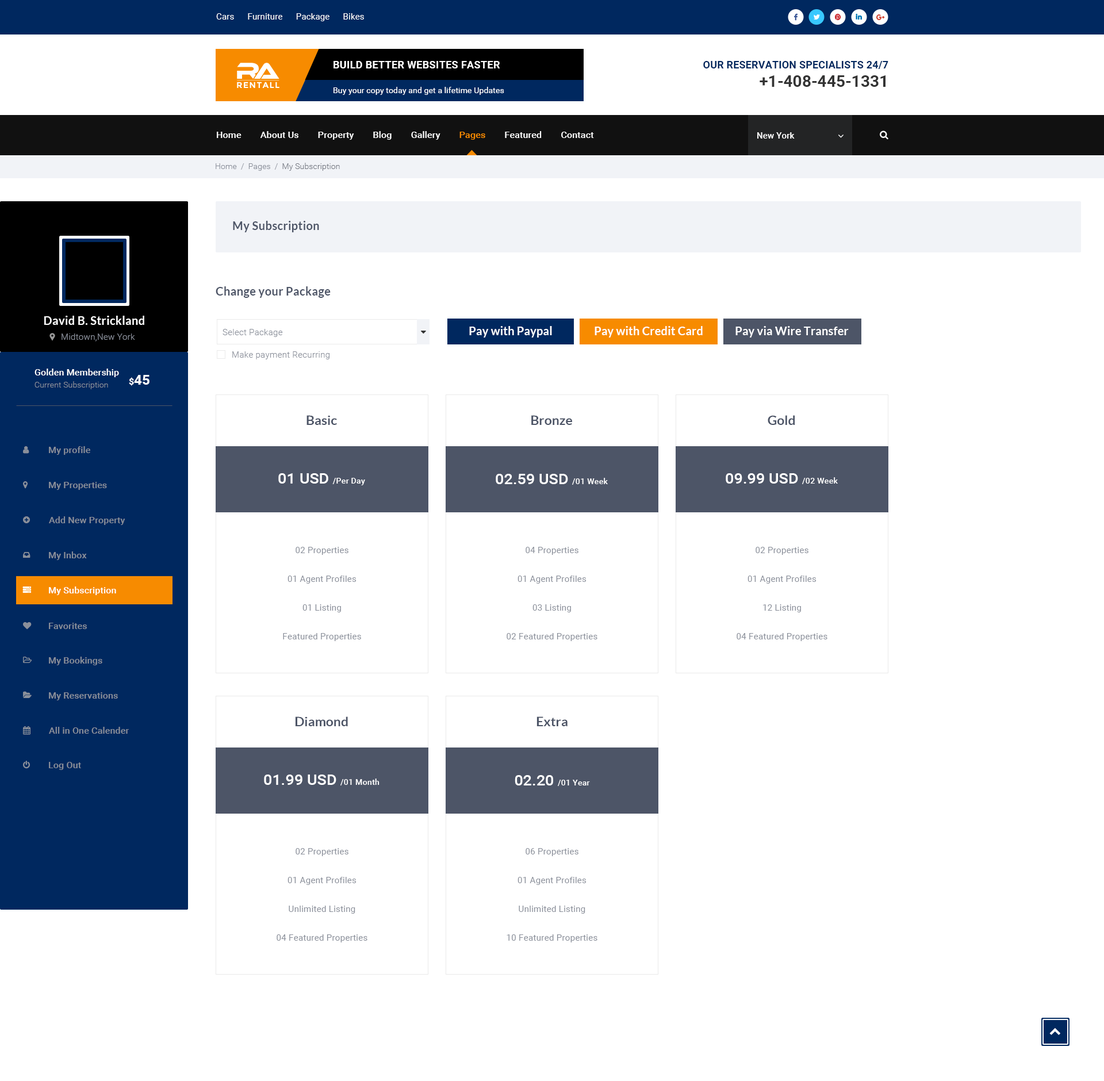
<style>
.page{position:relative;width:1104px;height:1081px;background:#ffffff}
.page>*{position:absolute;margin:0}
.t1{font:8.6px "Roboto-Regular";letter-spacing:0.01em;color:#ffffff}
.t2{font:10.3px "Roboto-Bold";letter-spacing:0.02em;color:#ffffff;text-transform:uppercase}
.t3{font:10.3px "Roboto-Bold";letter-spacing:0.01em;color:#00285f;text-transform:uppercase}
.t4{font:16.1px "Roboto-Bold";color:#333333}
.t5{font:8.4px "Montserrat-Bold";letter-spacing:0.08em;color:#ffffff;text-transform:uppercase}
.t6{font:8px "Roboto-Regular";letter-spacing:0.01em;color:#ffffff}
.t7{font:9.2px "Roboto-Medium";letter-spacing:0.01em;color:#ffffff}
.t8{font:9.2px "Roboto-Medium";letter-spacing:0.01em;color:#f78b00}
.t9{font:8.6px "Roboto-Medium";letter-spacing:0.01em;color:#ffffff}
.t10{font:8px "Roboto-Light";letter-spacing:0.01em;color:#8a8f9a}
.t11{font:8px "Roboto-Light";letter-spacing:0.01em;color:#757983}
.t12{font:11.5px "Lato-Bold";letter-spacing:0.01em;color:#4d5567}
.t13{font:11.5px "Lato-Bold";letter-spacing:0.01em;color:#ffffff}
.t14{font:8.6px "Roboto-Light";letter-spacing:0.01em;color:#8a8f9a}
.t15{font:13.8px "Roboto-Bold";letter-spacing:0.01em;color:#ffffff}
.t16{font:9.2px "Roboto-Bold";letter-spacing:0.01em;color:#ffffff}
.t17{font:12.6px "Lato-Bold";letter-spacing:0.01em;color:#4d5567}
.t18{font:9.2px "Roboto-Medium";letter-spacing:0.01em;color:#8a8f9a}
.t19{font:8px "Roboto-Medium";letter-spacing:0.01em;color:#ffffff}
.t20{font:14.9px "Roboto-Medium";letter-spacing:0.01em;color:#ffffff}
.t21{font:8.6px/28.7px "Roboto-Regular";letter-spacing:0.01em;color:#8a8f9a}
</style>
<div class="page">
<p class="t1" style="left:216px;top:13px;width:148px;height:8px">Cars      Furniture      Package      Bikes</p>
<p class="t2" style="left:333px;top:61px;width:167px;height:7px">Build better Websites Faster</p>
<p class="t3" style="left:703px;top:61px;width:185px;height:8px">Our Reservation Specialists 24/7</p>
<p class="t4" style="left:759px;top:75px;width:126px;height:12px">+1-408-445-1331</p>
<p class="t5" style="left:237px;top:82px;width:42px;height:6px">RentAll</p>
<p class="t6" style="left:333px;top:87px;width:171px;height:8px">Buy your copy today and get a lifetime Updates</p>
<p class="t7" style="left:217px;top:131px;width:377px;height:9px">Home        About Us        Property        Blog        Gallery        <span class="t8">Pages</span>        Featured        Contact</p>
<p class="t9" style="left:757px;top:132px;width:37px;height:7px">New York</p>
<p class="t10" style="left:216px;top:163px;width:124px;height:8px">Home  /  Pages  /  <span class="t11">My Subscription</span></p>
<p class="t12" style="left:233px;top:221px;width:86px;height:11px">My Subscription</p>
<p class="t12" style="left:216px;top:286px;width:114px;height:12px">Change your Package</p>
<p class="t13" style="left:44px;top:316px;width:100px;height:9px">David B. Strickland</p>
<p class="t14" style="left:222px;top:329px;width:61px;height:8px">Select Package</p>
<p class="t13" style="left:469px;top:326px;width:83px;height:11px">Pay with Paypal</p>
<p class="t13" style="left:594px;top:326px;width:108px;height:11px">Pay with Credit Card</p>
<p class="t13" style="left:735px;top:326px;width:113px;height:11px">Pay via Wire Transfer</p>
<p class="t14" style="left:61px;top:333px;width:74px;height:8px">Midtown,New York</p>
<p class="t14" style="left:232px;top:351px;width:97px;height:8px">Make payment Recurring</p>
<p class="t7" style="left:34px;top:368px;width:85px;height:9px">Golden Membership</p>
<p class="t15" style="left:129px;top:375px;width:20px;height:11px"><span class="t16">$</span>45</p>
<p class="t10" style="left:34px;top:381px;width:74px;height:8px">Current Subscription</p>
<p class="t17" style="left:306px;top:415px;width:31px;height:10px">Basic</p>
<p class="t17" style="left:531px;top:415px;width:41px;height:10px">Bronze</p>
<p class="t17" style="left:767px;top:415px;width:28px;height:10px">Gold</p>
<p class="t18" style="left:49px;top:446px;width:41px;height:9px">My profile</p>
<p class="t19" style="left:278px;top:473px;width:87px;height:12px"><span class="t20">01 USD </span>/Per Day</p>
<p class="t20" style="left:495px;top:474px;width:113px;height:11px">02.59 USD <span class="t19">/01 Week</span></p>
<p class="t20" style="left:725px;top:473px;width:112px;height:11px">09.99 USD <span class="t19">/02 Week</span></p>
<p class="t18" style="left:49px;top:482px;width:58px;height:8px">My Properties</p>
<p class="t18" style="left:49px;top:516px;width:76px;height:9px">Add New Property</p>
<p class="t18" style="left:49px;top:551px;width:38px;height:9px">My Inbox</p>
<p class="t21" style="left:283px;top:547px;width:78px;height:94px;text-align:center">02 Properties<br>01 Agent Profiles<br>01 Listing<br>Featured Properties</p>
<p class="t21" style="left:506px;top:547px;width:91px;height:94px;text-align:center">04 Properties<br>01 Agent Profiles<br>03 Listing<br>02 Featured Properties</p>
<p class="t21" style="left:736px;top:547px;width:91px;height:94px;text-align:center">02 Properties<br>01 Agent Profiles<br>12 Listing<br>04 Featured Properties</p>
<p class="t7" style="left:49px;top:586px;width:67px;height:9px">My Subscription</p>
<p class="t18" style="left:49px;top:622px;width:38px;height:7px">Favorites</p>
<p class="t18" style="left:49px;top:656px;width:53px;height:9px">My Bookings</p>
<p class="t18" style="left:49px;top:692px;width:69px;height:8px">My Reservations</p>
<p class="t17" style="left:295px;top:716px;width:53px;height:10px">Diamond</p>
<p class="t17" style="left:536px;top:716px;width:31px;height:10px">Extra</p>
<p class="t18" style="left:49px;top:726px;width:80px;height:7px">All in One Calender</p>
<p class="t18" style="left:49px;top:762px;width:32px;height:8px">Log Out</p>
<p class="t20" style="left:264px;top:774px;width:115px;height:11px">01.99 USD <span class="t19">/01 Month</span></p>
<p class="t19" style="left:514px;top:775px;width:76px;height:11px"><span class="t20">02.20 </span>/01 Year</p>
<p class="t21" style="left:276px;top:848px;width:91px;height:94px;text-align:center">02 Properties<br>01 Agent Profiles<br>Unlimited Listing<br>04 Featured Properties</p>
<p class="t21" style="left:506px;top:848px;width:91px;height:94px;text-align:center">06 Properties<br>01 Agent Profiles<br>Unlimited Listing<br>10 Featured Properties</p>
</div>
